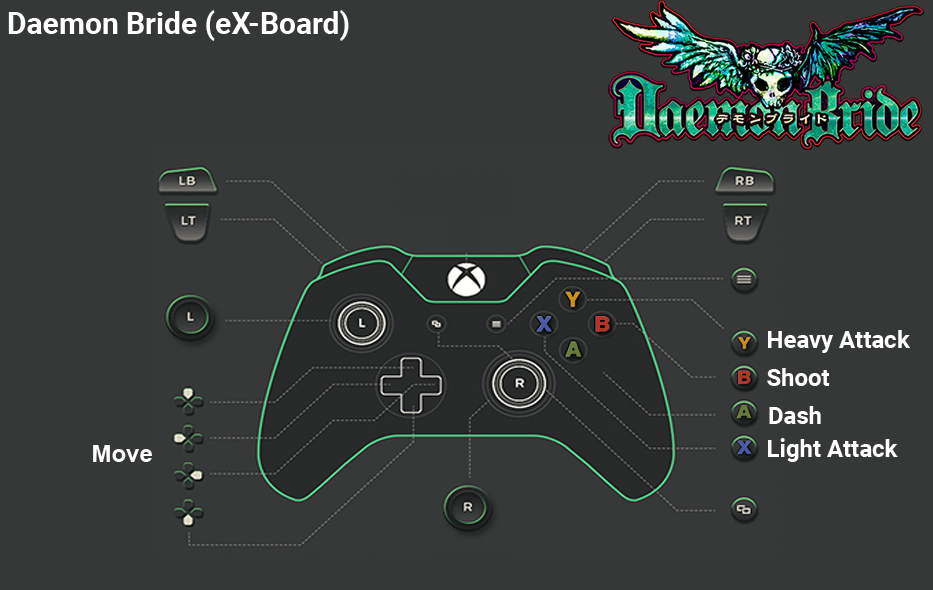
<style>
.page{position:relative;width:933px;height:590px;background:#363838}
.page>*{position:absolute;margin:0}
.t1{font:30px "Roboto-Bold";color:#ffffff}
.t2{font:24px "Roboto-Bold";color:#ffffff}
.t3{font:24px "Arial-BoldMT";color:#fefefe}
</style>
<div class="page">
<p class="t1" style="left:8px;top:10px;width:341px;height:31px">Daemon Bride (eX-Board)</p>
<p class="t2" style="left:768px;top:330px;width:143px;height:23px">Heavy Attack</p>
<p class="t2" style="left:767px;top:368px;width:63px;height:18px">Shoot</p>
<p class="t2" style="left:769px;top:406px;width:52px;height:18px">Dash</p>
<p class="t2" style="left:768px;top:438px;width:130px;height:24px">Light Attack</p>
<p class="t3" style="left:93px;top:445px;width:59px;height:17px">Move</p>
</div>
